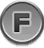
<style>
.page{position:relative;width:44px;height:48px}
.page>*{position:absolute;margin:0}
.t1{font:29.3px "DFSoGeiStd-W9";letter-spacing:0.05em;color:#3d3d3d;scale:0.9 1}
</style>
<div class="page">
<p class="t1" style="left:14px;top:13px;width:16px;height:19px">F</p>
</div>
